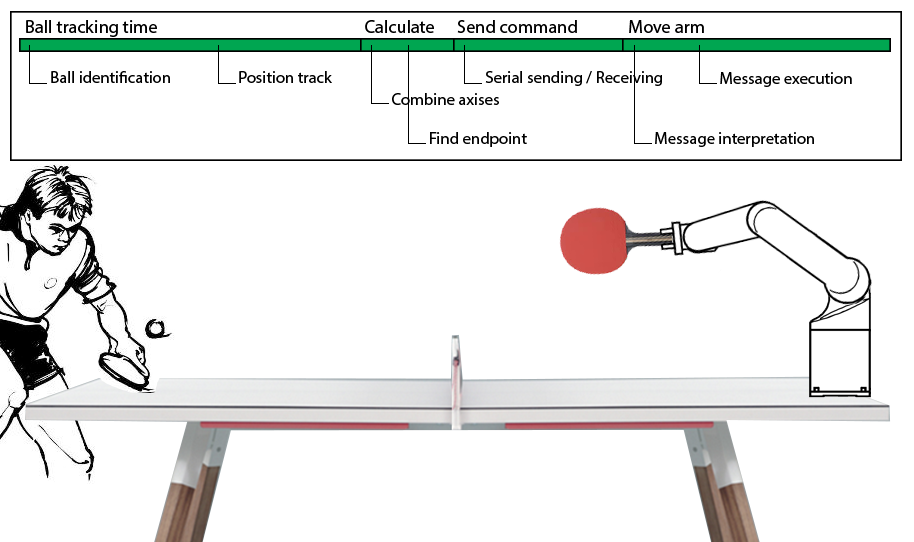
<style>
.page{position:relative;width:914px;height:542px;background:#ffffff}
.page>*{position:absolute;margin:0}
.t1{font:18.3px "MyriadPro-Regular";color:#000000}
.t2{font:16.7px "MyriadPro-Regular";color:#000000}
</style>
<div class="page">
<p class="t1" style="left:26px;top:20px;width:678px;height:17px">Ball tracking time          Calculate Send command        Move arm</p>
<p class="t2" style="left:51px;top:71px;width:119px;height:12px">Ball identification</p>
<p class="t2" style="left:239px;top:71px;width:93px;height:12px">Position track</p>
<p class="t2" style="left:485px;top:71px;width:177px;height:15px">Serial sending / Receiving</p>
<p class="t2" style="left:720px;top:72px;width:132px;height:15px">Message execution</p>
<p class="t2" style="left:392px;top:93px;width:107px;height:12px">Combine axises</p>
<p class="t2" style="left:430px;top:132px;width:97px;height:15px">Find endpoint</p>
<p class="t2" style="left:655px;top:132px;width:159px;height:15px">Message interpretation</p>
</div>
